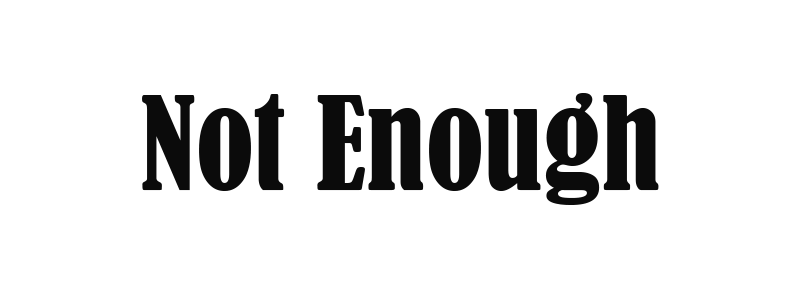
<style>
.page{position:relative;width:800px;height:300px;background:#ffffff}
.page>*{position:absolute;margin:0}
.t1{font:121px "BernardMT-Condensed";color:#0b0b0b}
</style>
<div class="page">
<p class="t1" style="left:142px;top:93px;width:517px;height:112px">Not Enough</p>
</div>
